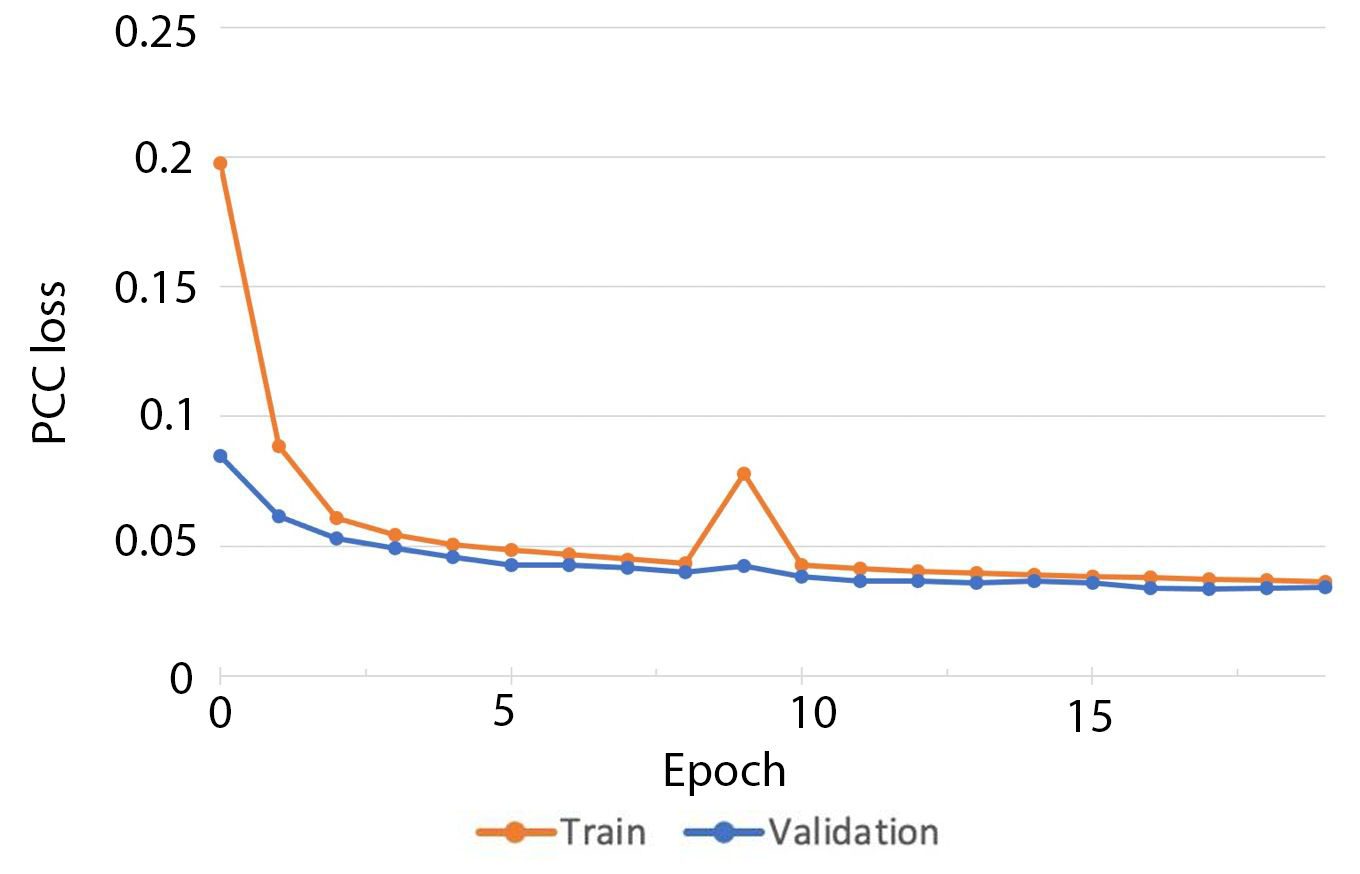
<style>
.page{position:relative;width:1360px;height:874px;background:#ffffff}
.page>*{position:absolute;margin:0}
.t1{font:48px "MyriadPro-Regular";color:#000000}
</style>
<div class="page">
<p class="t1" style="left:115px;top:15px;width:81px;height:32px">0.25</p>
<p class="t1" style="left:135px;top:141px;width:56px;height:32px">0.2<br>.</p>
<p class="t1" style="left:115px;top:271px;width:81px;height:32px">0.15<br>.06</p>
<p class="t1" style="left:30px;top:282px;width:35px;height:161px;rotate:-90deg">PCC loss</p>
<p class="t1" style="left:140px;top:398px;width:49px;height:32px">0.1<br>.0</p>
<p class="t1" style="left:115px;top:524px;width:81px;height:32px">0.05</p>
<p class="t1" style="left:170px;top:662px;width:22px;height:32px">0</p>
<p class="t1" style="left:209px;top:696px;width:22px;height:32px">0</p>
<p class="t1" style="left:494px;top:694px;width:20px;height:32px">5</p>
<p class="t1" style="left:792px;top:696px;width:44px;height:32px">10</p>
<p class="t1" style="left:1069px;top:700px;width:43px;height:32px">15</p>
<p class="t1" style="left:665px;top:751px;width:120px;height:45px">Epoch</p>
</div>
